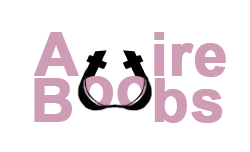
<style>
.page{position:relative;width:250px;height:152px;background:#ffffff}
.page>*{position:absolute;margin:0}
.t1{font:60px "Arial-BoldMT";color:#cf9cb6;font-weight:bold}
.t2{font:60px "Arial-BoldMT";font-weight:bold}
</style>
<div class="page">
<p class="t1" style="left:34px;top:32px;width:45px;height:44px">A</p>
<p class="t1" style="left:154px;top:32px;width:72px;height:45px">ire</p>
<p class="t1" style="left:34px;top:78px;width:38px;height:44px">B</p>
<p class="t2" style="left:79px;top:76px;width:72px;height:34px">oo</p>
<p class="t1" style="left:154px;top:78px;width:69px;height:45px">bs</p>
</div>
